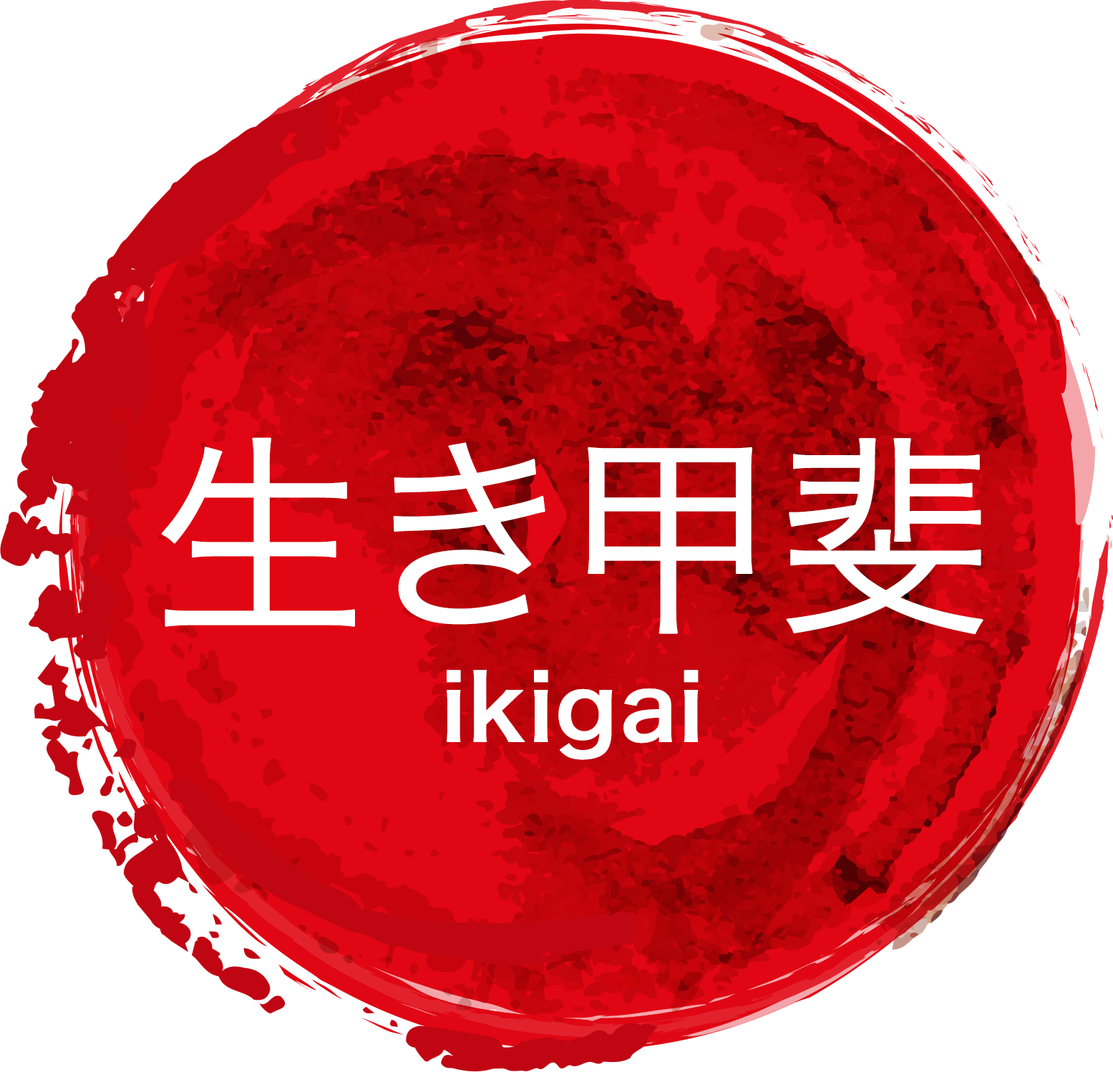
<style>
.page{position:relative;width:1113px;height:1072px;background:#ffffff}
.page>*{position:absolute;margin:0}
.t1{font:214.6px "HiraKakuProN-W3";color:#ffffff;font-weight:bold}
.t2{font:89.4px "HiraKakuProN-W6";color:#ffffff;font-weight:bold}
</style>
<div class="page">
<p class="t1" style="left:161px;top:437px;width:822px;height:198px">生き甲斐</p>
<p class="t2" style="left:446px;top:670px;width:252px;height:90px">ikigai</p>
</div>
